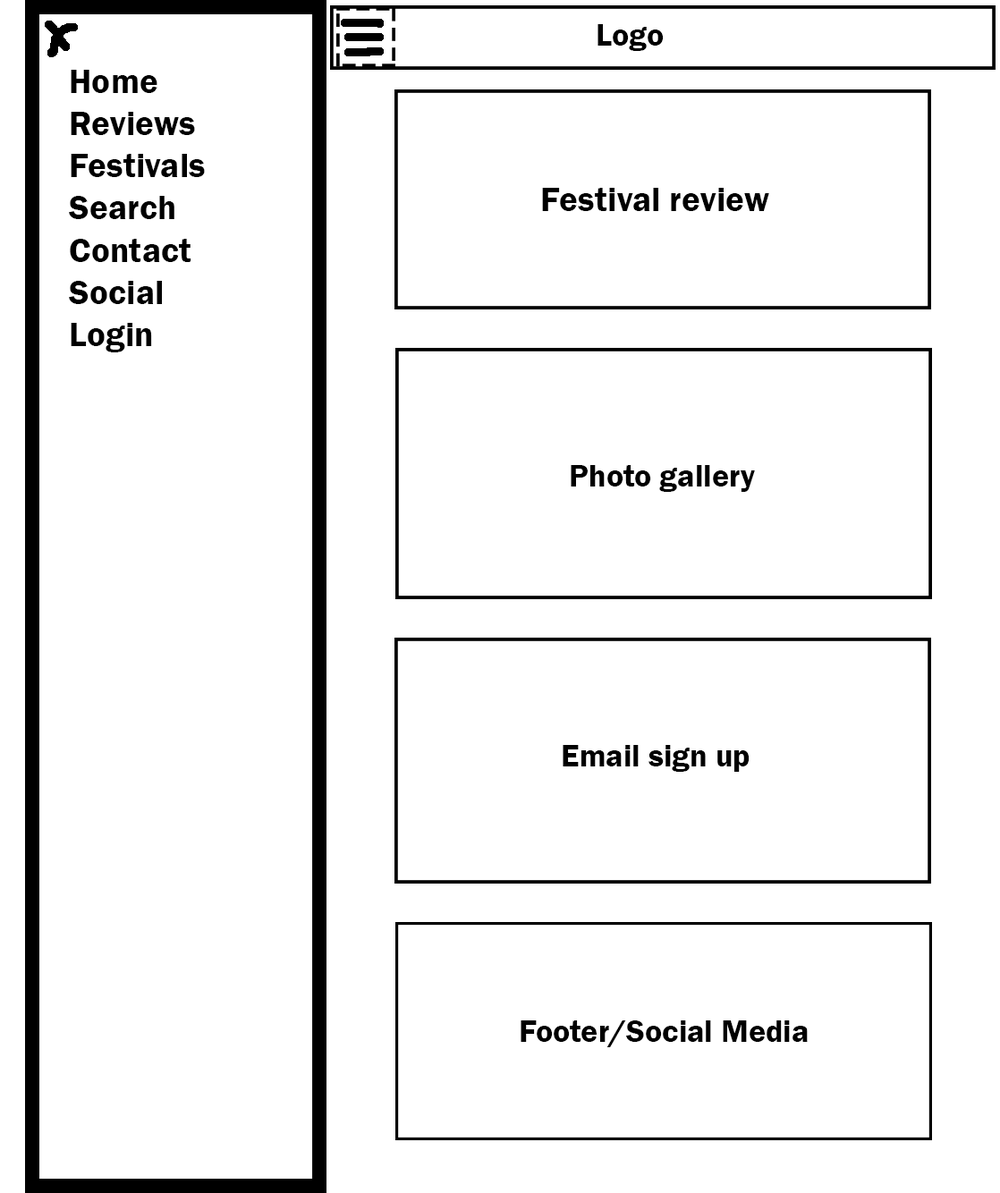
<style>
.page{position:relative;width:1000px;height:1193px;background:#ffffff}
.page>*{position:absolute;margin:0}
.t1{font:32px "FranklinGothic-Demi";color:#000000}
.t2{font:35.2px "FranklinGothic-Demi";color:#000000}
</style>
<div class="page">
<p class="t1" style="left:597px;top:24px;width:66px;height:27px">Logo</p>
<p class="t2" style="left:69px;top:70px;width:136px;height:282px">Home<br>Reviews<br>Festivals<br>Search<br>Contact<br>Social<br>Login</p>
<p class="t2" style="left:542px;top:188px;width:227px;height:23px">Festival review</p>
<p class="t1" style="left:570px;top:465px;width:185px;height:27px">Photo gallery</p>
<p class="t1" style="left:562px;top:745px;width:187px;height:27px">Email sign up</p>
<p class="t1" style="left:520px;top:1020px;width:287px;height:27px">Footer/Social Media</p>
</div>
